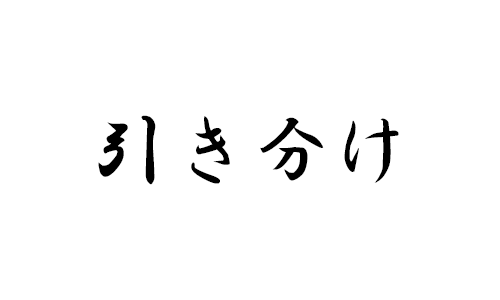
<style>
.page{position:relative;width:500px;height:300px;background:#ffffff}
.page>*{position:absolute;margin:0}
.t1{font:80px "HGSGyoshotai";color:#000000}
</style>
<div class="page">
<p class="t1" style="left:98px;top:115px;width:301px;height:70px">引き分け</p>
</div>
